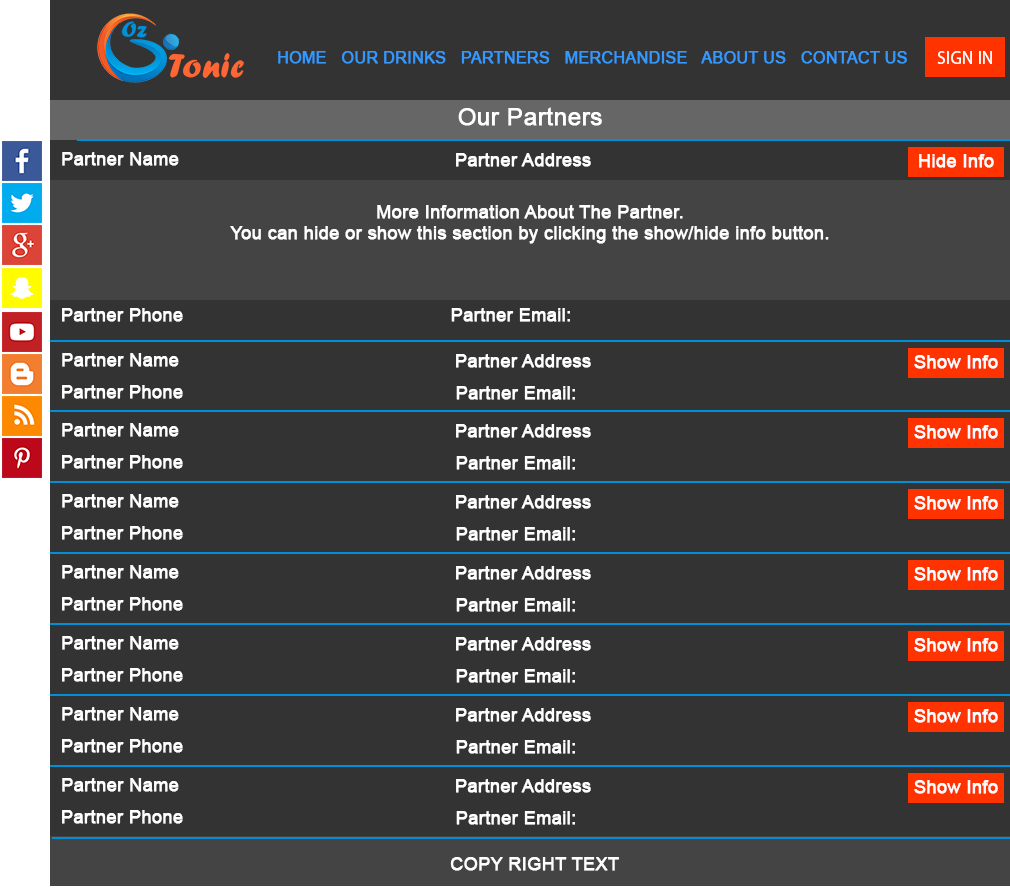
<style>
.page{position:relative;width:1010px;height:895px;background:#333333}
.page>*{position:absolute;margin:0}
.t1{font:16px "ArialMT";color:#3399ff;font-weight:bold}
.t2{font:18px "MyriadPro-Regular";color:#ffffff}
.t3{font:24px "ArialMT";color:#ffffff;font-weight:bold}
.t4{font:18px "ArialMT";color:#ffffff;font-weight:bold}
</style>
<div class="page">
<p class="t1" style="left:278px;top:51px;width:629px;height:13px">HOME   OUR DRINKS   PARTNERS   MERCHANDISE   ABOUT US   CONTACT US</p>
<p class="t2" style="left:937px;top:51px;width:55px;height:13px">SIGN IN</p>
<p class="t3" style="left:458px;top:107px;width:144px;height:19px">Our Partners</p>
<p class="t4" style="left:62px;top:152px;width:117px;height:14px">Partner Name</p>
<p class="t4" style="left:456px;top:153px;width:135px;height:14px">Partner Address</p>
<p class="t4" style="left:919px;top:154px;width:75px;height:14px">Hide Info</p>
<p class="t4" style="left:230px;top:205px;width:599px;height:39px;text-align:center">More Information About The Partner. <br>You can hide or show this section by clicking the show/hide info button.</p>
<p class="t4" style="left:62px;top:308px;width:121px;height:14px">Partner Phone</p>
<p class="t4" style="left:451px;top:308px;width:119px;height:14px">Partner Email:</p>
<p class="t4" style="left:62px;top:353px;width:117px;height:14px">Partner Name</p>
<p class="t4" style="left:456px;top:354px;width:135px;height:14px">Partner Address</p>
<p class="t4" style="left:914px;top:355px;width:84px;height:14px">Show Info</p>
<p class="t4" style="left:62px;top:385px;width:121px;height:14px">Partner Phone</p>
<p class="t4" style="left:456px;top:386px;width:119px;height:14px">Partner Email:</p>
<p class="t4" style="left:62px;top:423px;width:117px;height:14px">Partner Name</p>
<p class="t4" style="left:456px;top:424px;width:135px;height:14px">Partner Address</p>
<p class="t4" style="left:914px;top:425px;width:84px;height:14px">Show Info</p>
<p class="t4" style="left:62px;top:455px;width:121px;height:14px">Partner Phone</p>
<p class="t4" style="left:456px;top:456px;width:119px;height:14px">Partner Email:</p>
<p class="t4" style="left:62px;top:494px;width:117px;height:14px">Partner Name</p>
<p class="t4" style="left:456px;top:495px;width:135px;height:14px">Partner Address</p>
<p class="t4" style="left:914px;top:496px;width:84px;height:14px">Show Info</p>
<p class="t4" style="left:62px;top:526px;width:121px;height:14px">Partner Phone</p>
<p class="t4" style="left:456px;top:527px;width:119px;height:14px">Partner Email:</p>
<p class="t4" style="left:62px;top:565px;width:117px;height:14px">Partner Name</p>
<p class="t4" style="left:456px;top:566px;width:135px;height:14px">Partner Address</p>
<p class="t4" style="left:914px;top:567px;width:84px;height:14px">Show Info</p>
<p class="t4" style="left:62px;top:597px;width:121px;height:14px">Partner Phone</p>
<p class="t4" style="left:456px;top:598px;width:119px;height:14px">Partner Email:</p>
<p class="t4" style="left:62px;top:636px;width:117px;height:14px">Partner Name</p>
<p class="t4" style="left:456px;top:637px;width:135px;height:14px">Partner Address</p>
<p class="t4" style="left:914px;top:638px;width:84px;height:14px">Show Info</p>
<p class="t4" style="left:62px;top:668px;width:121px;height:14px">Partner Phone</p>
<p class="t4" style="left:456px;top:669px;width:119px;height:14px">Partner Email:</p>
<p class="t4" style="left:62px;top:707px;width:117px;height:14px">Partner Name</p>
<p class="t4" style="left:456px;top:708px;width:135px;height:14px">Partner Address</p>
<p class="t4" style="left:914px;top:709px;width:84px;height:14px">Show Info</p>
<p class="t4" style="left:62px;top:739px;width:121px;height:14px">Partner Phone</p>
<p class="t4" style="left:456px;top:740px;width:119px;height:14px">Partner Email:</p>
<p class="t4" style="left:62px;top:778px;width:117px;height:14px">Partner Name</p>
<p class="t4" style="left:456px;top:779px;width:135px;height:14px">Partner Address</p>
<p class="t4" style="left:914px;top:780px;width:84px;height:14px">Show Info</p>
<p class="t4" style="left:62px;top:810px;width:121px;height:14px">Partner Phone</p>
<p class="t4" style="left:456px;top:811px;width:119px;height:14px">Partner Email:</p>
<p class="t4" style="left:450px;top:857px;width:169px;height:14px">COPY RIGHT TEXT</p>
</div>
